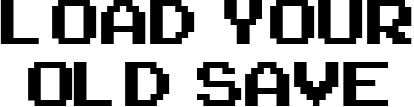
<style>
.page{position:relative;width:414px;height:107px;background:#ffffff}
.page>*{position:absolute;margin:0}
.t1{font:88.4px/62.1px "ArcadeClassic";color:#000000}
</style>
<div class="page">
<p class="t1" style="left:0px;top:0px;width:412px;height:106px;text-align:center">Load  your<br>old  save</p>
</div>
